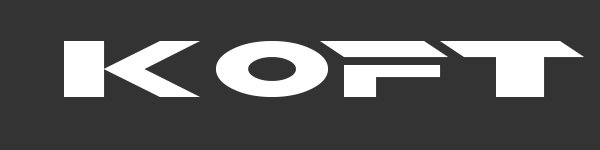
<style>
.page{position:relative;width:600px;height:150px;background:#333333}
.page>*{position:absolute;margin:0}
.t1{font:64px "Jet-Bradley";color:#ffffff;scale:2 1}
</style>
<div class="page">
<p class="t1" style="left:64px;top:41px;width:520px;height:56px">KOFT</p>
</div>
